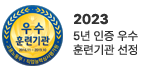
<style>
.page{position:relative;width:150px;height:70px;background:#ffffff}
.page>*{position:absolute;margin:0}
.t1{font:14px "Pretendard-Bold";color:#333333}
.t2{font:12px/14px "Pretendard-Regular";color:#333333}
</style>
<div class="page">
<p class="t1" style="left:74px;top:13px;width:34px;height:12px">2023</p>
<p class="t2" style="left:73px;top:30px;width:65px;height:25px">5년 인증 우수<br>훈련기관 선정</p>
</div>
